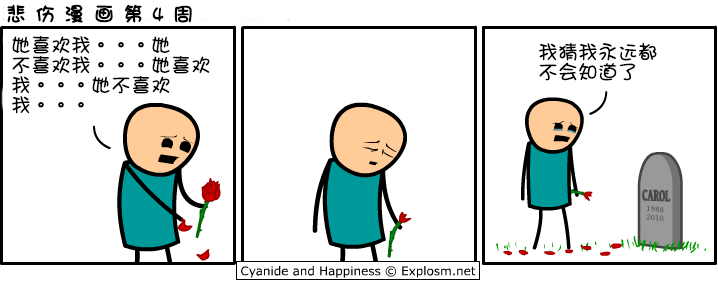
<style>
.page{position:relative;width:718px;height:304px;background:#ffffff}
.page>*{position:absolute;margin:0}
.t1{font:20px "DFGirl";letter-spacing:0.44em;color:#000000;font-weight:bold}
.t2{font:20px/20px "DFGirl";color:#000000}
</style>
<div class="page">
<p class="t1" style="left:7px;top:4px;width:185px;height:19px">悲伤漫画第4周</p>
<p class="t2" style="left:11px;top:35px;width:199px;height:79px">她喜欢我。。。她<br>不喜欢我。。。她喜欢<br>我。。。她不喜欢<br>我。。。</p>
<p class="t2" style="left:538px;top:42px;width:119px;height:39px">我猜我永远都<br>不会知道了</p>
</div>
